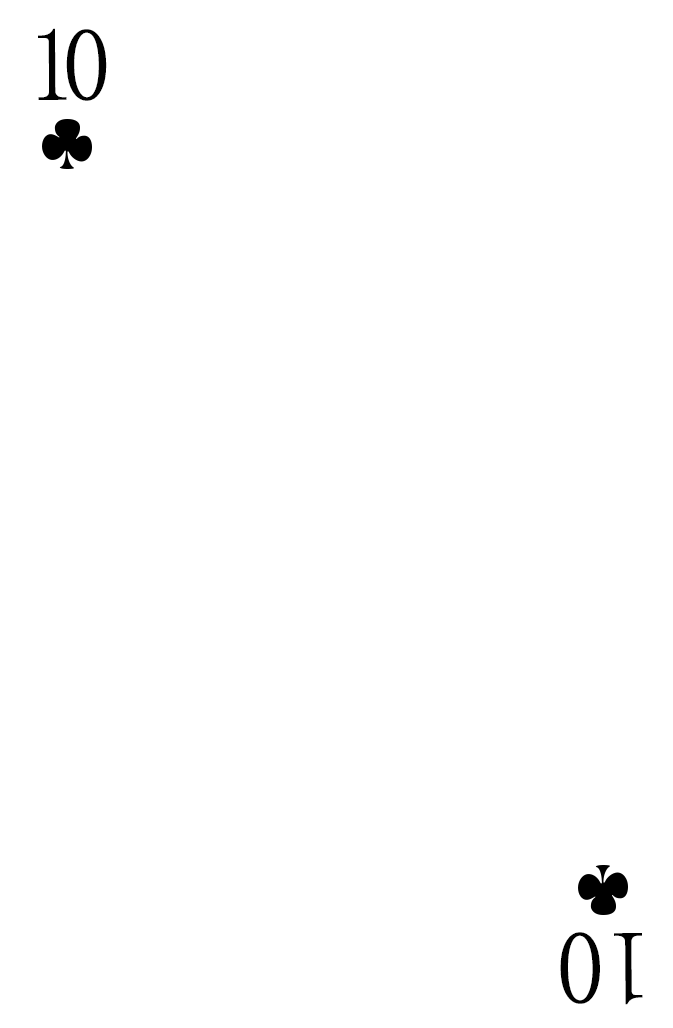
<style>
.page{position:relative;width:673px;height:1028px;background:#ffffff}
.page>*{position:absolute;margin:0}
.t1{font:104.2px "SimSun-ExtB";letter-spacing:-0.14em;color:#010101;scale:0.93 1}
.t2{font:104.2px "SimSun-ExtB";color:#010101;scale:0.93 1}
</style>
<div class="page">
<p class="t1" style="left:38px;top:28px;width:69px;height:73px">10</p>
<p class="t2" style="left:560px;top:932px;width:83px;height:73px;rotate:180deg">10</p>
</div>
